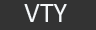
<style>
.page{position:relative;width:96px;height:30px;background:#333333}
.page>*{position:absolute;margin:0}
.t1{font:28px "Calibri";color:#f5f8fa}
</style>
<div class="page">
<p class="t1" style="left:24px;top:4px;width:43px;height:18px">VTY</p>
</div>
